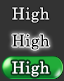
<style>
.page{position:relative;width:64px;height:81px;background:#333333}
.page>*{position:absolute;margin:0}
.t1{font:16px "CenturySchoolbook";letter-spacing:0.025em;color:#f1f1f1}
.t2{font:16px "CenturySchoolbook";letter-spacing:0.025em;color:#000000}
.t3{font:16px "CenturySchoolbook";letter-spacing:0.025em;color:#ffffff}
</style>
<div class="page">
<p class="t1" style="left:12px;top:7px;width:38px;height:16px">High</p>
<p class="t2" style="left:12px;top:34px;width:38px;height:16px">High</p>
<p class="t3" style="left:12px;top:61px;width:38px;height:16px">High</p>
</div>
